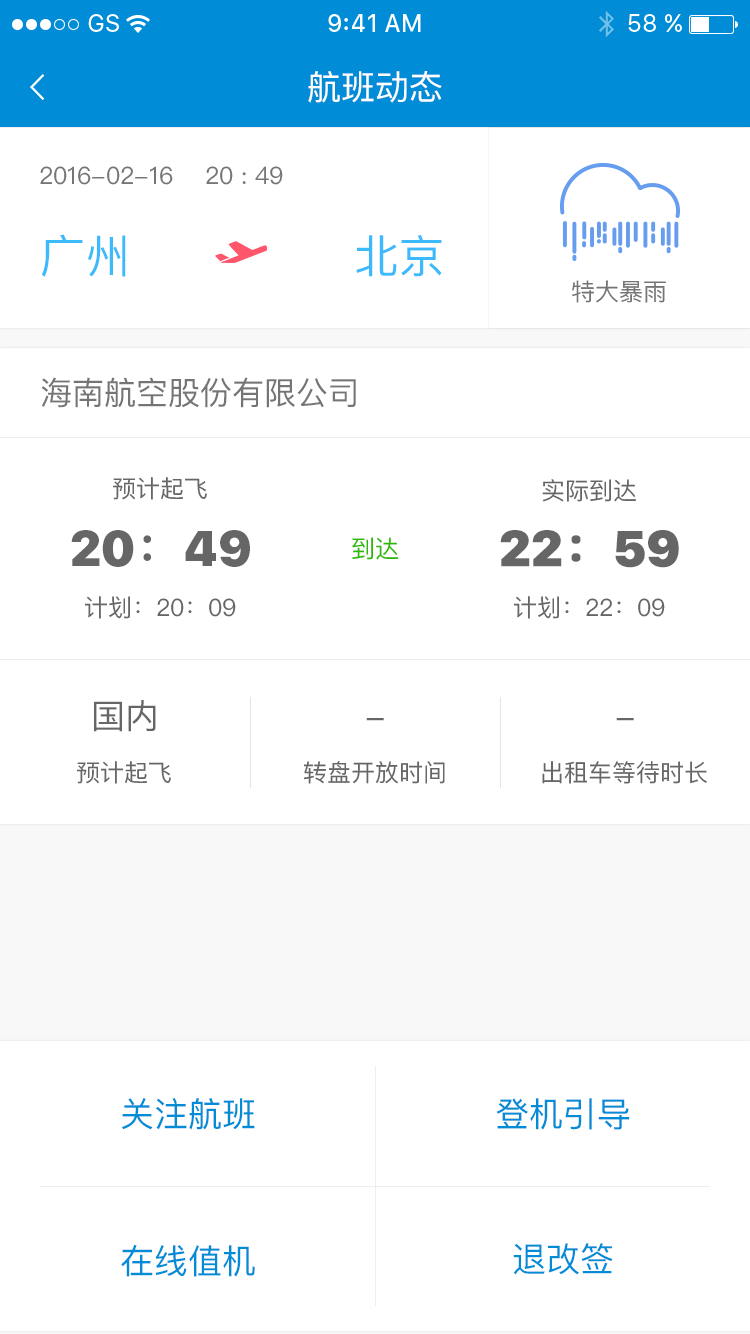
<style>
.page{position:relative;width:750px;height:1334px;background:#ffffff}
.page>*{position:absolute;margin:0}
.t1{font:34px "PingFangSC-Regular";color:#ffffff}
.t2{font:24px "PingFangSC-Regular";color:#757575}
.t3{font:45px "PingFangSC-Regular";color:#3cbafc}
.t4{font:32px "PingFangSC-Regular";color:#757575}
.t5{font:24px "PingFangSC-Regular";color:#666666}
.t6{font:49px "SFUIDisplay-Black";color:#666666}
.t7{font:49px "PingFangSC-Semibold";color:#666666}
.t8{font:49px "SFUIDisplay-Black";color:#666666;font-weight:bold}
.t9{font:49px "PingFangSC-Semibold";color:#666666;font-weight:bold}
.t10{font:24px "PingFangSC-Regular";color:#2cba00}
.t11{font:34px "PingFangSC-Regular";color:#666666}
.t12{font:34px "PingFangSC-Regular";color:#008cd6}
</style>
<div class="page">
<p class="t1" style="left:308px;top:71px;width:134px;height:32px">航班动态</p>
<p class="t2" style="left:40px;top:166px;width:243px;height:19px">2016-02-16    20 : 49</p>
<p class="t3" style="left:42px;top:234px;width:84px;height:43px">广州</p>
<p class="t3" style="left:356px;top:235px;width:86px;height:42px">北京</p>
<p class="t2" style="left:572px;top:280px;width:94px;height:23px">特大暴雨</p>
<p class="t4" style="left:41px;top:377px;width:315px;height:31px">海南航空股份有限公司</p>
<p class="t5" style="left:113px;top:477px;width:94px;height:23px">预计起飞</p>
<p class="t5" style="left:542px;top:479px;width:94px;height:23px">实际到达</p>
<p class="t6" style="left:71px;top:530px;width:179px;height:37px">20<span class="t7">：</span>49</p>
<p class="t8" style="left:500px;top:530px;width:179px;height:38px">22<span class="t9">：</span>59</p>
<p class="t10" style="left:352px;top:537px;width:46px;height:23px">到达</p>
<p class="t5" style="left:85px;top:596px;width:151px;height:23px">计划：20：09</p>
<p class="t5" style="left:514px;top:596px;width:151px;height:23px">计划：22：09</p>
<p class="t11" style="left:94px;top:700px;width:62px;height:32px">国内</p>
<p class="t11" style="left:366px;top:718px;width:18px;height:3px">-</p>
<p class="t11" style="left:616px;top:718px;width:18px;height:3px">-</p>
<p class="t5" style="left:77px;top:761px;width:94px;height:23px">预计起飞</p>
<p class="t5" style="left:304px;top:761px;width:141px;height:23px">转盘开放时间</p>
<p class="t5" style="left:542px;top:761px;width:165px;height:23px">出租车等待时长</p>
<p class="t12" style="left:121px;top:1098px;width:134px;height:32px">关注航班</p>
<p class="t12" style="left:496px;top:1098px;width:134px;height:32px">登机引导</p>
<p class="t12" style="left:121px;top:1245px;width:134px;height:32px">在线值机</p>
<p class="t12" style="left:513px;top:1243px;width:100px;height:32px">退改签</p>
</div>
